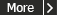
<style>
.page{position:relative;width:57px;height:15px;background:#2b2b29}
.page>*{position:absolute;margin:0}
.t1{font:12.2px "Tahoma";color:#ffffff}
</style>
<div class="page">
<p class="t1" style="left:7px;top:3px;width:27px;height:9px">More</p>
</div>
